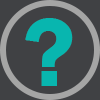
<style>
.page{position:relative;width:100px;height:100px;background:#404144}
.page>*{position:absolute;margin:0}
.t1{font:100px "FranklinGothic-Demi";color:#08b6af}
</style>
<div class="page">
<p class="t1" style="left:25px;top:18px;width:48px;height:68px">?</p>
</div>
